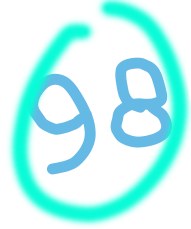
<style>
.page{position:relative;width:191px;height:229px;background:#ffffff}
.page>*{position:absolute;margin:0}
.t1{font:150px "kindergarten";color:#65b9e5}
</style>
<div class="page">
<p class="t1" style="left:27px;top:57px;width:145px;height:118px;rotate:-11deg">98</p>
</div>
